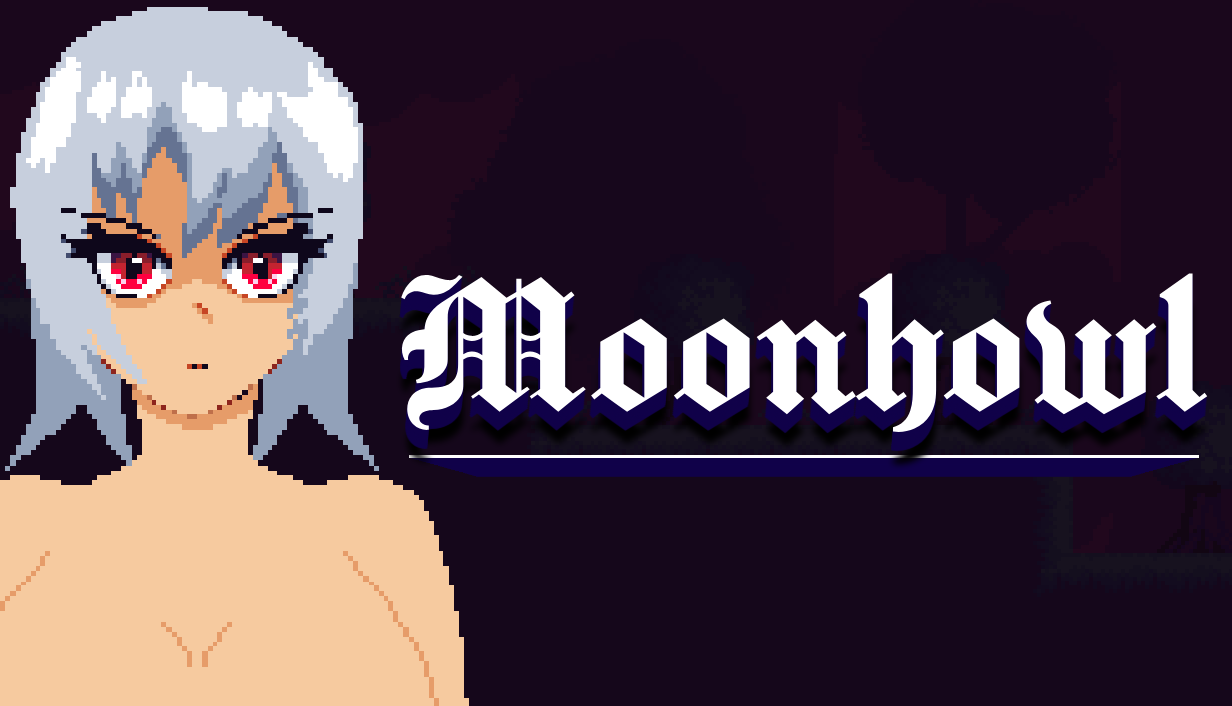
<style>
.page{position:relative;width:1232px;height:706px;background:#15071b}
.page>*{position:absolute;margin:0}
.t1{font:180px "Chomsky";color:#ffffff}
</style>
<div class="page">
<p class="t1" style="left:401px;top:273px;width:807px;height:159px">Moonhowl</p>
</div>
